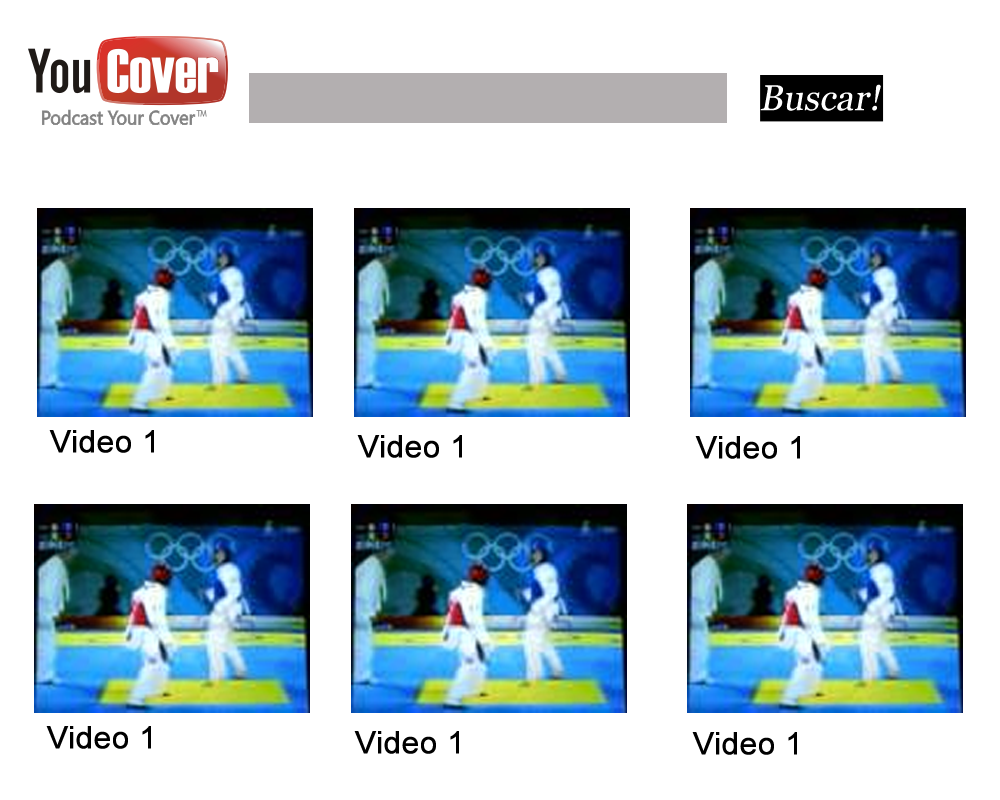
<style>
.page{position:relative;width:1000px;height:800px;background:#ffffff}
.page>*{position:absolute;margin:0}
.t1{font:36px "Georgia";color:#ffffff;font-style:italic}
.t2{font:31px "ArialMT";color:#000000;font-weight:bold}
</style>
<div class="page">
<p class="t1" style="left:760px;top:84px;width:121px;height:27px">Buscar!</p>
<p class="t2" style="left:49px;top:430px;width:105px;height:23px">Video 1</p>
<p class="t2" style="left:357px;top:435px;width:105px;height:23px">Video 1</p>
<p class="t2" style="left:695px;top:436px;width:105px;height:23px">Video 1</p>
<p class="t2" style="left:46px;top:726px;width:105px;height:23px">Video 1</p>
<p class="t2" style="left:354px;top:731px;width:105px;height:23px">Video 1</p>
<p class="t2" style="left:692px;top:732px;width:105px;height:23px">Video 1</p>
</div>
